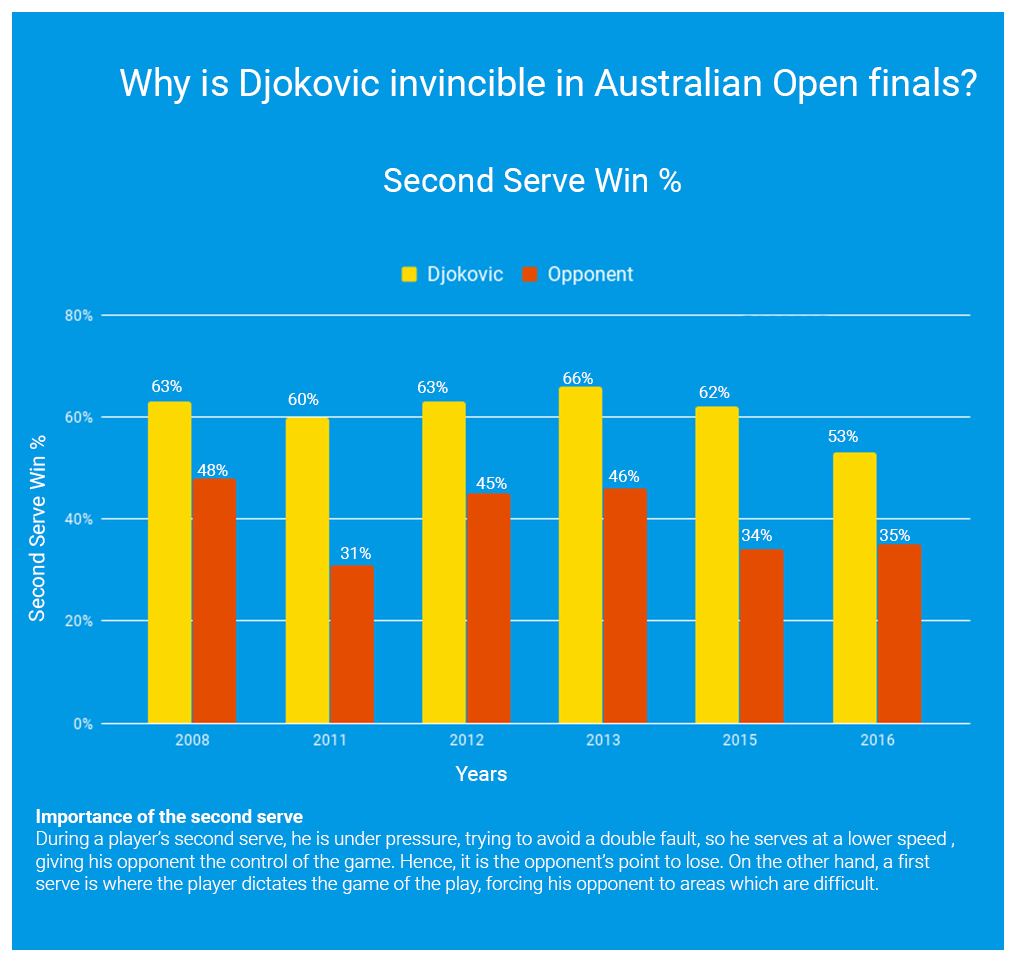
<style>
.page{position:relative;width:1016px;height:961px;background:#0199e4}
.page>*{position:absolute;margin:0}
.t1{font:37.5px "Roboto-Regular";color:#ffffff}
.t2{font:33.3px "Roboto-Regular";color:#ffffff}
.t3{font:16.7px "Roboto-Regular";color:#ffffff}
.t4{font:20.8px "Roboto-Regular";color:#ffffff}
.t5{font:18.8px "Roboto-Light";color:#ffffff}
.t6{font:18.8px "Roboto-Bold";color:#ffffff}
</style>
<div class="page">
<p class="t1" style="left:120px;top:67px;width:857px;height:37px">Why is Djokovic invincible in Australian Open finals?</p>
<p class="t2" style="left:384px;top:167px;width:297px;height:25px">Second Serve Win %</p>
<p class="t3" style="left:563px;top:372px;width:30px;height:12px">66%</p>
<p class="t3" style="left:152px;top:380px;width:30px;height:12px">63%</p>
<p class="t3" style="left:418px;top:381px;width:30px;height:12px">63%</p>
<p class="t3" style="left:699px;top:386px;width:31px;height:12px">62%</p>
<p class="t3" style="left:288px;top:393px;width:31px;height:12px">60%</p>
<p class="t4" style="left:28px;top:435px;width:18px;height:187px;rotate:-90deg">Second Serve Win %</p>
<p class="t3" style="left:828px;top:430px;width:30px;height:12px">53%</p>
<p class="t3" style="left:197px;top:464px;width:31px;height:12px">48%</p>
<p class="t3" style="left:608px;top:470px;width:32px;height:12px">46%</p>
<p class="t3" style="left:476px;top:477px;width:31px;height:12px">45%</p>
<p class="t3" style="left:742px;top:529px;width:30px;height:12px">34%</p>
<p class="t3" style="left:880px;top:529px;width:30px;height:12px">35%</p>
<p class="t3" style="left:341px;top:547px;width:30px;height:12px">31%</p>
<p class="t4" style="left:455px;top:766px;width:52px;height:15px">Years</p>
<p class="t5" style="left:36px;top:809px;width:918px;height:85px"><span class="t6">Importance of the second serve<br></span>During a player’s second serve, he is under pressure, trying to avoid a double fault, so he serves at a lower speed , <br>giving his opponent the control of the game. Hence, it is the opponent’s point to lose. On the other hand, a first <br>serve is where the player dictates the game of the play, forcing his opponent to areas which are difficult.</p>
</div>
